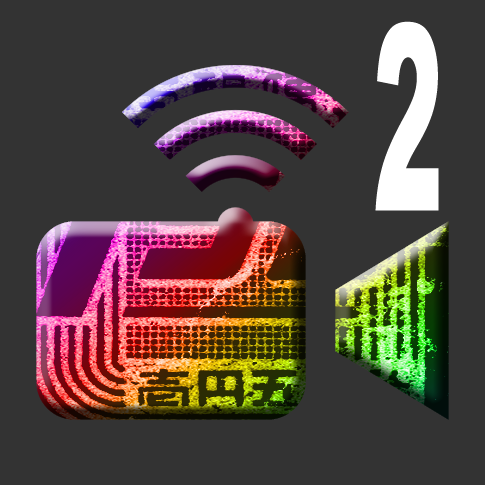
<style>
.page{position:relative;width:485px;height:485px;background:#333333}
.page>*{position:absolute;margin:0}
.t1{font:259px "Arial-Black";letter-spacing:0.1em;color:#ffffff;scale:0.41 1}
</style>
<div class="page">
<p class="t1" style="left:375px;top:21px;width:64px;height:190px">2</p>
</div>
